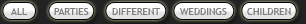
<style>
.page{position:relative;width:306px;height:24px}
.page>*{position:absolute;margin:0}
.t1{font:10px "TrebuchetMS";color:#7f7f7f}
</style>
<div class="page">
<p class="t1" style="left:11px;top:8px;width:16px;height:7px">ALL</p>
<p class="t1" style="left:54px;top:8px;width:35px;height:7px">PARTIES</p>
<p class="t1" style="left:112px;top:8px;width:49px;height:7px">DIFFERENT</p>
<p class="t1" style="left:180px;top:8px;width:47px;height:7px">WEDDINGS</p>
<p class="t1" style="left:247px;top:8px;width:44px;height:7px">CHILDREN</p>
</div>
